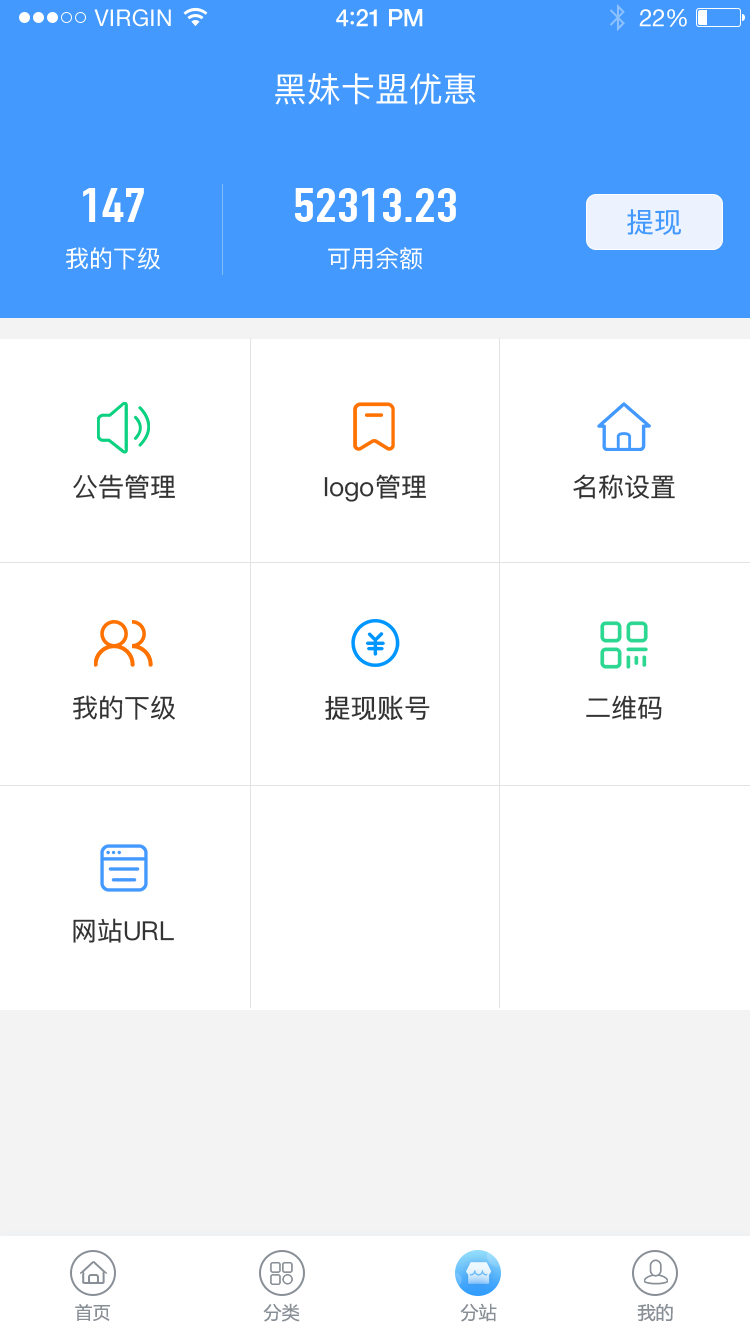
<style>
.page{position:relative;width:750px;height:1334px;background:#ffffff}
.page>*{position:absolute;margin:0}
.t1{font:34px "PingFangSC-Regular";color:#ffffff}
.t2{font:48px "DINCondensed-Bold";color:#ffffff;scale:1.23 1}
.t3{font:28px "PingFangSC-Regular";color:#4399fe}
.t4{font:24px "PingFangSC-Regular";color:#ffffff}
.t5{font:26px "PingFangSC-Regular";color:#333333}
.t6{font:26px "PingFang-SC-Regular";color:#333333;font-weight:bold}
.t7{font:26px "PingFangSC-Regular";color:#333333;text-transform:uppercase}
.t8{font:18px "FZLTHJW--GB1-0";color:#898f96}
.t9{font:18px "MicrosoftYaHei";color:#898f96}
</style>
<div class="page">
<p class="t1" style="left:275px;top:73px;width:201px;height:32px">黑妹卡盟优惠</p>
<p class="t2" style="left:83px;top:188px;width:61px;height:34px">147</p>
<p class="t2" style="left:295px;top:188px;width:161px;height:34px">52313.23</p>
<p class="t3" style="left:627px;top:209px;width:54px;height:26px">提现</p>
<p class="t4" style="left:66px;top:247px;width:94px;height:23px">我的下级</p>
<p class="t4" style="left:328px;top:247px;width:95px;height:23px">可用余额</p>
<p class="t5" style="left:73px;top:474px;width:102px;height:25px">公告管理</p>
<p class="t5" style="left:324px;top:474px;width:102px;height:28px">logo管理</p>
<p class="t5" style="left:573px;top:474px;width:102px;height:25px">名称设置</p>
<p class="t5" style="left:73px;top:695px;width:102px;height:25px">我的下级</p>
<p class="t6" style="left:325px;top:695px;width:105px;height:26px">提现账号</p>
<p class="t5" style="left:586px;top:695px;width:76px;height:25px">二维码</p>
<p class="t7" style="left:73px;top:918px;width:101px;height:25px"><span class="t5">网站</span>url</p>
<p class="t8" style="left:75px;top:1304px;width:35px;height:17px">首页</p>
<p class="t9" style="left:263px;top:1303px;width:37px;height:19px">分类</p>
<p class="t9" style="left:460px;top:1303px;width:37px;height:19px">分站</p>
<p class="t9" style="left:637px;top:1303px;width:36px;height:19px">我的</p>
</div>
